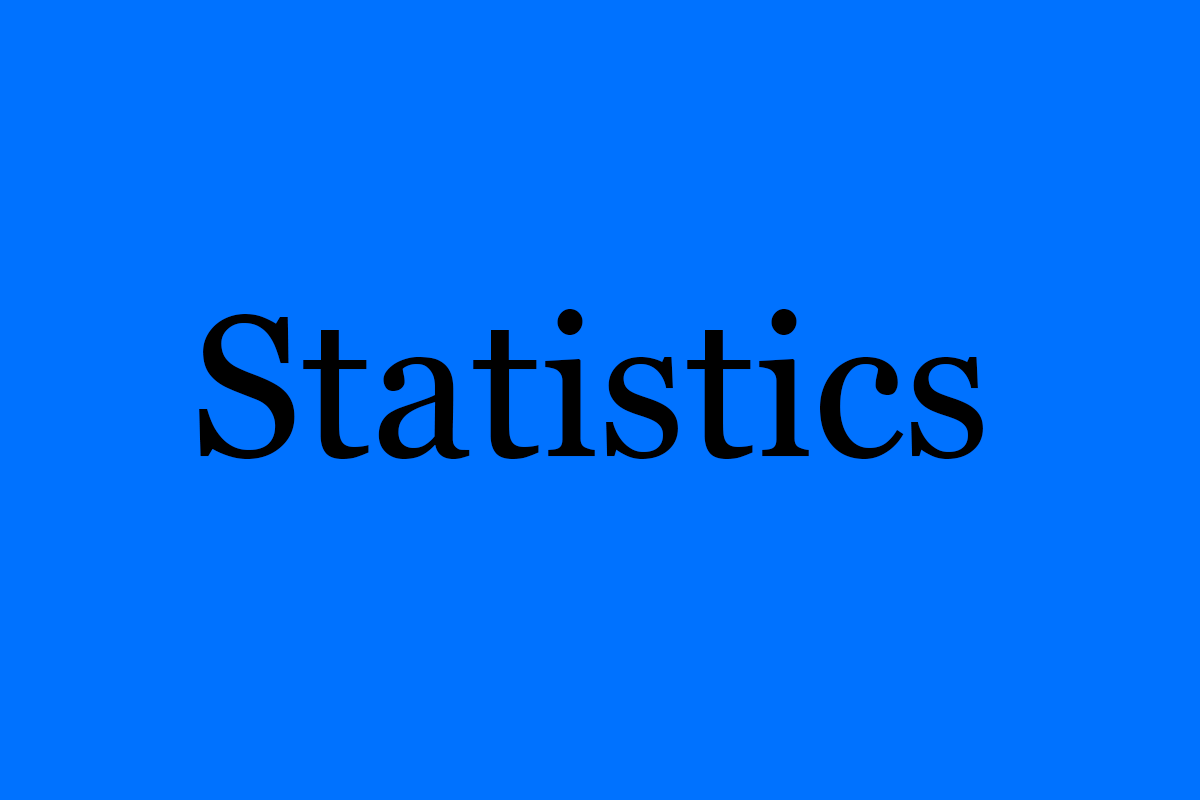
<style>
.page{position:relative;width:1200px;height:800px;background:#0072ff}
.page>*{position:absolute;margin:0}
.t1{font:200px "Georgia";color:#000000}
</style>
<div class="page">
<p class="t1" style="left:199px;top:309px;width:784px;height:150px">Statistics</p>
</div>
